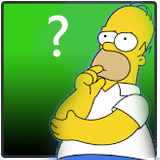
<style>
.page{position:relative;width:160px;height:160px}
.page>*{position:absolute;margin:0}
.t1{font:52.9px "MicrosoftJhengHeiBold";letter-spacing:0.08em;color:#faf9f8;scale:0.93 1}
</style>
<div class="page">
<p class="t1" style="left:48px;top:15px;width:20px;height:42px">?</p>
</div>
